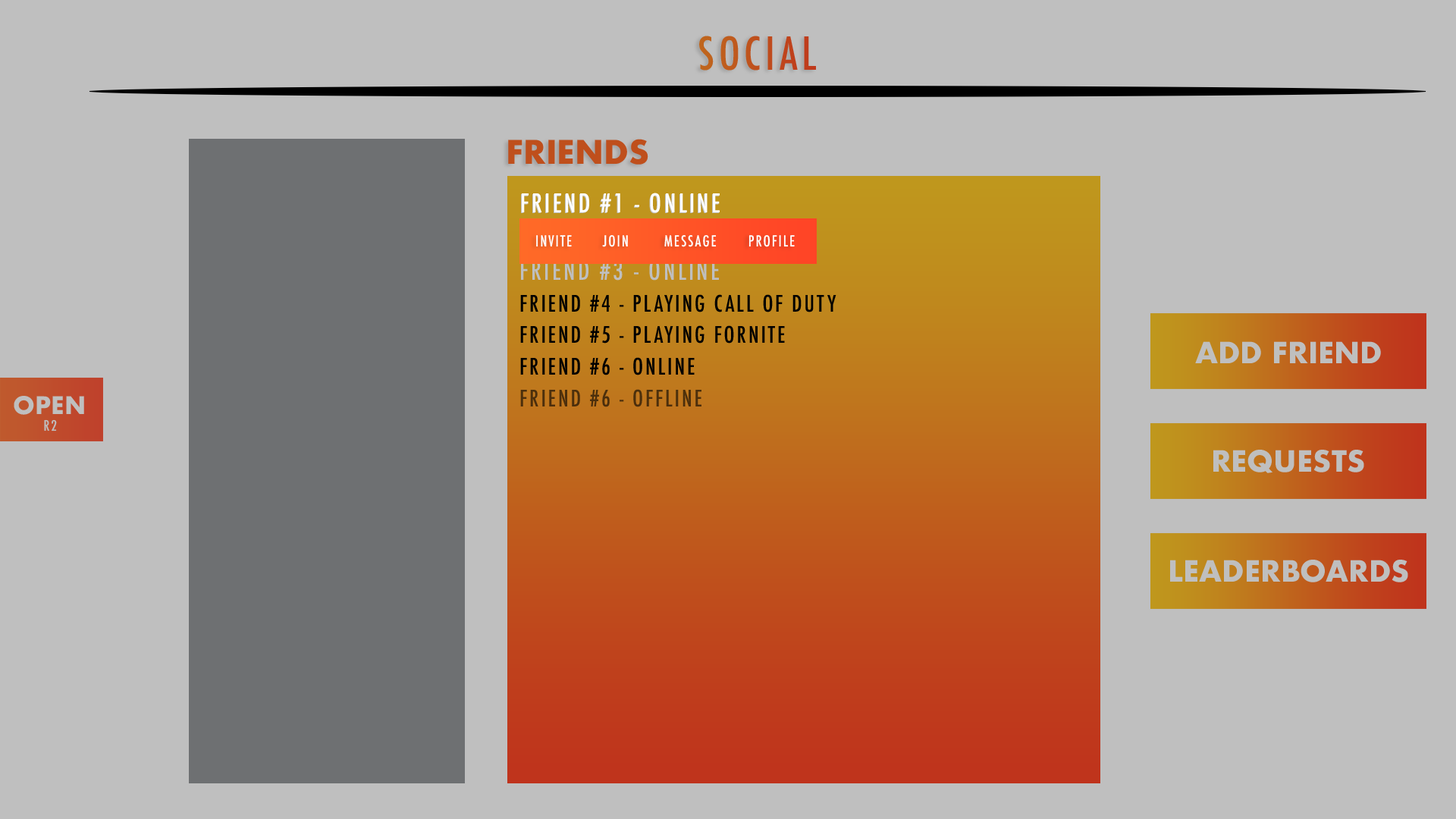
<style>
.page{position:relative;width:1456px;height:819px;background:#bfbfbf}
.page>*{position:absolute;margin:0}
.t1{font:44.2px "Futura-CondensedMedium";letter-spacing:0.1em;color:#bf521d}
.t2{font:31.6px "Futura-Bold";color:#bf4f1c}
.t3{font:25.3px "Futura-CondensedMedium";letter-spacing:0.1em;color:#ffffff}
.t4{font:14.8px "Futura-CondensedMedium";letter-spacing:0.1em;color:#ffffff}
.t5{font:25.3px "Futura-CondensedMedium";letter-spacing:0.1em;color:#bfbfbf}
.t6{font:22.1px "Futura-CondensedMedium";letter-spacing:0.1em;color:#000000}
.t7{font:28.4px "Futura-Bold";color:#bfbfbf}
.t8{font:22.1px "Futura-CondensedMedium";letter-spacing:0.1em;color:#4c2f0c}
.t9{font:23.6px "Futura-Bold";color:#bfbfbf}
.t10{font:14.1px "Futura-CondensedMedium";letter-spacing:0.1em;color:#bfbfbf}
</style>
<div class="page">
<p class="t1" style="left:699px;top:36px;width:117px;height:35px">SOCIAL</p>
<p class="t2" style="left:508px;top:139px;width:140px;height:26px">FRIENDS</p>
<p class="t3" style="left:521px;top:193px;width:198px;height:21px">FRIEND #1 - ONLINE</p>
<p class="t3" style="left:522px;top:193px;width:198px;height:20px">FRIEND #1 - ONLINE</p>
<p class="t4" style="left:536px;top:235px;width:36px;height:12px">INVITE</p>
<p class="t4" style="left:602px;top:235px;width:26px;height:12px">JOIN</p>
<p class="t4" style="left:664px;top:235px;width:53px;height:12px">MESSAGE</p>
<p class="t4" style="left:748px;top:235px;width:47px;height:12px">PROFILE</p>
<p class="t5" style="left:521px;top:260px;width:198px;height:21px">FRIEND #3 - ONLINE</p>
<p class="t6" style="left:520px;top:294px;width:316px;height:18px">FRIEND #4 - PLAYING CALL OF DUTY</p>
<p class="t6" style="left:520px;top:325px;width:265px;height:19px">FRIEND #5 - PLAYING FORNITE</p>
<p class="t7" style="left:1195px;top:341px;width:186px;height:22px">ADD FRIEND</p>
<p class="t6" style="left:520px;top:357px;width:175px;height:18px">FRIEND #6 - ONLINE</p>
<p class="t8" style="left:520px;top:389px;width:181px;height:18px">FRIEND #6 - OFFLINE</p>
<p class="t9" style="left:14px;top:396px;width:70px;height:19px">OPEN</p>
<p class="t10" style="left:44px;top:419px;width:13px;height:12px">R2</p>
<p class="t7" style="left:1213px;top:450px;width:151px;height:23px">REQUESTS</p>
<p class="t7" style="left:1170px;top:560px;width:238px;height:22px">LEADERBOARDS</p>
</div>
